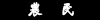
<style>
.page{position:relative;width:100px;height:20px;background:#000000}
.page>*{position:absolute;margin:0}
.t1{font:15.7px "SunYatsenHsingshu-";color:#ffffff;font-weight:bold}
</style>
<div class="page">
<p class="t1" style="left:28px;top:2px;width:46px;height:15px">农  民</p>
</div>
